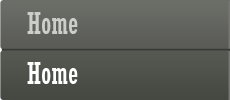
<style>
.page{position:relative;width:230px;height:100px}
.page>*{position:absolute;margin:0}
.t1{font:30px "Rockwell-Condensed";color:#cccecb}
.t2{font:30px "Rockwell-Condensed";color:#fefffe}
</style>
<div class="page">
<p class="t1" style="left:27px;top:12px;width:51px;height:22px">Home</p>
<p class="t2" style="left:27px;top:62px;width:51px;height:22px">Home</p>
</div>
